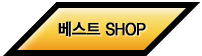
<style>
.page{position:relative;width:202px;height:56px;background:#ffffff}
.page>*{position:absolute;margin:0}
.t1{font:17px "YDIYGO330";letter-spacing:-0.025em;color:#000000;font-weight:bold;scale:0.91 1}
</style>
<div class="page">
<p class="t1" style="left:58px;top:21px;width:88px;height:16px">베스트 SHOP</p>
</div>
